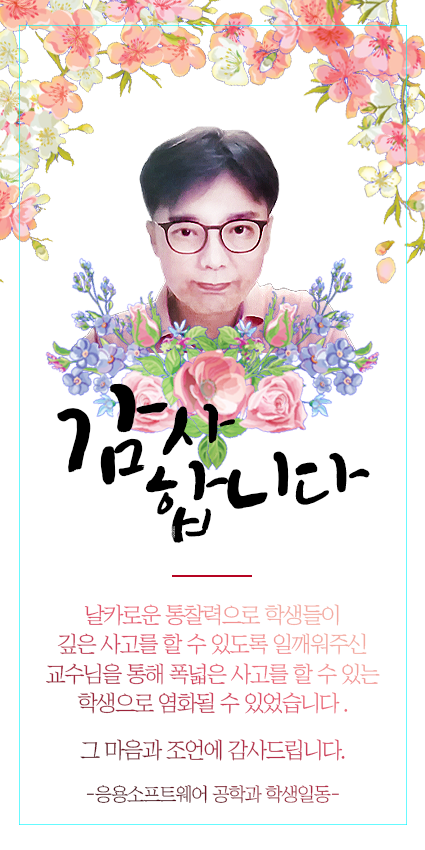
<style>
.page{position:relative;width:425px;height:850px;background:#ffffff}
.page>*{position:absolute;margin:0}
.t1{font:130px/79px "Makgeolli";letter-spacing:-0.1em;color:#000000}
.t2{font:98.9px/79px "Makgeolli";letter-spacing:-0.1em;color:#000000}
.t3{font:98.9px/79px "Makgeolli";letter-spacing:-0.08em;color:#000000}
.t4{font:111px/79px "Makgeolli";letter-spacing:-0.08em;color:#000000}
.t5{font:22.2px/29.6px "ChosunilboNM";letter-spacing:-0.06em}
.t6{font:22.2px/46.1px "ChosunilboNM";letter-spacing:-0.06em}
.t7{font:19px/42.1px "ChosunilboNM";letter-spacing:-0.06em}
</style>
<div class="page">
<p class="t1" style="left:57px;top:383px;width:313px;height:160px;rotate:-6deg">감<span class="t2">사<br>          </span><span class="t3">합</span><span class="t4">니</span><span class="t3">다</span></p>
<p class="t5" style="left:46px;top:604px;width:334px;height:200px;text-align:center">날카로운 통찰력으로 학생들이<br>깊은 사고를 할 수 있도록 일깨워주신<br>교수님을 통해 폭넓은 사고를 할 수 있는<br><span class="t6">학생으로 염화될 수 있었습니다 .<br>그 마음과 조언에 감사드립니다.<br></span><span class="t7">-응용소프트웨어 공학과 학생일동-</span></p>
</div>
